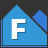
<style>
.page{position:relative;width:48px;height:48px;background:#3497d6}
.page>*{position:absolute;margin:0}
.t1{font:28px "SegoeUI-Bold";color:#fefeff;scale:1.2 1}
</style>
<div class="page">
<p class="t1" style="left:11px;top:19px;width:15px;height:20px">F</p>
</div>
